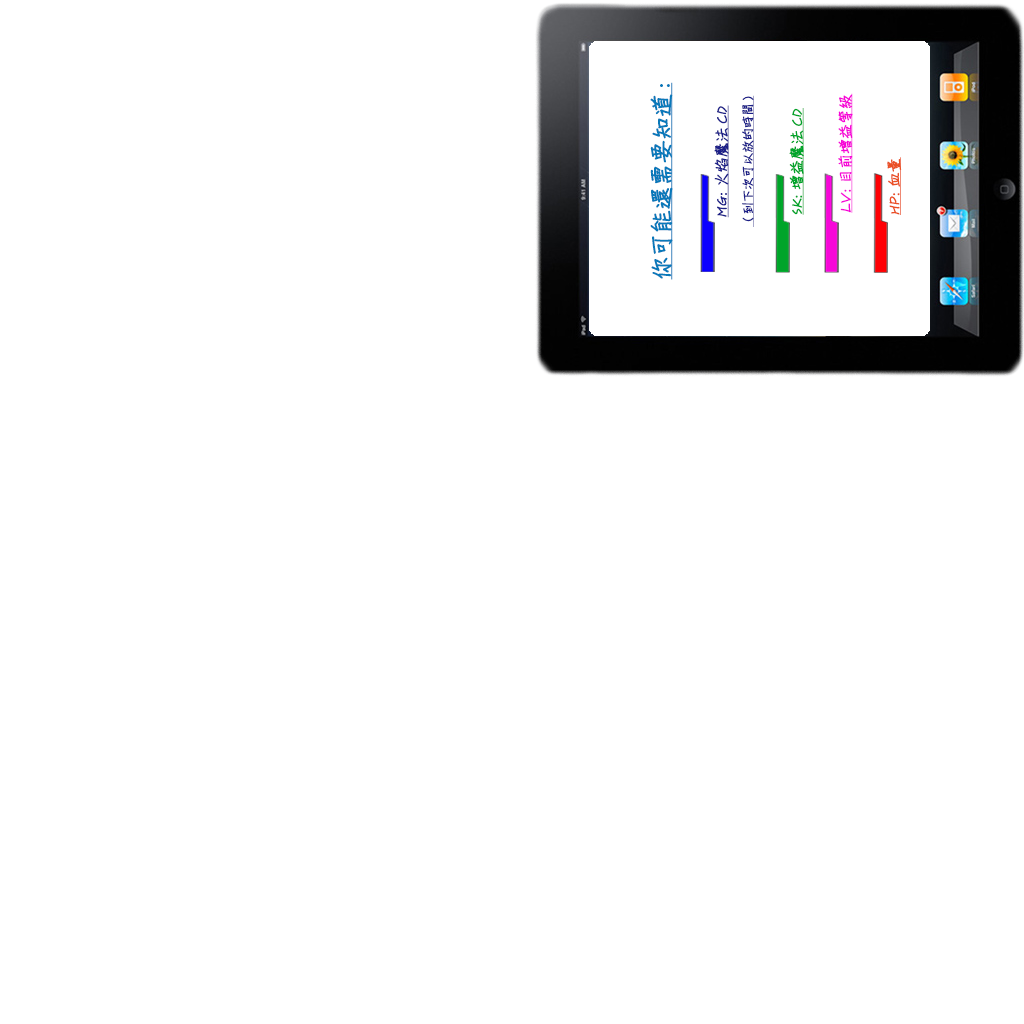
<style>
.page{position:relative;width:1024px;height:1024px;background:#ffffff}
.page>*{position:absolute;margin:0}
.t1{font:22.6px "DFChu-W4-WINP-BF";color:#0979ba;font-weight:bold;text-decoration:underline}
.t2{font:12px "DFChu-W4-WINP-BF";color:#1d2088;font-weight:bold;text-decoration:underline}
.t3{font:14.5px "DFChu-W4-WINP-BF";color:#1d2088;font-weight:bold;text-decoration:underline}
.t4{font:14.5px "DFChu-W4-WINP-BF";color:#f707d8;font-weight:bold;text-decoration:underline}
.t5{font:14.5px "DFChu-W4-WINP-BF";color:#00a42a;font-weight:bold;text-decoration:underline}
.t6{font:14.5px "DFChu-W4-WINP-BF";color:#ea5025;font-weight:bold;text-decoration:underline}
</style>
<div class="page">
<p class="t1" style="left:650px;top:82px;width:23px;height:198px;rotate:-90deg">你可能還需要知道:</p>
<p class="t2" style="left:714px;top:95px;width:40px;height:132px;text-align:center;rotate:-90deg"><span class="t3">MG: 火焰魔法CD<br> </span>(到下次可以放的時間)</p>
<p class="t4" style="left:838px;top:93px;width:15px;height:120px;rotate:-90deg">LV: 目前增益等級</p>
<p class="t5" style="left:789px;top:108px;width:15px;height:107px;rotate:-90deg">SK: 增益魔法CD</p>
<p class="t6" style="left:887px;top:157px;width:15px;height:58px;rotate:-90deg">HP: 血量</p>
</div>
